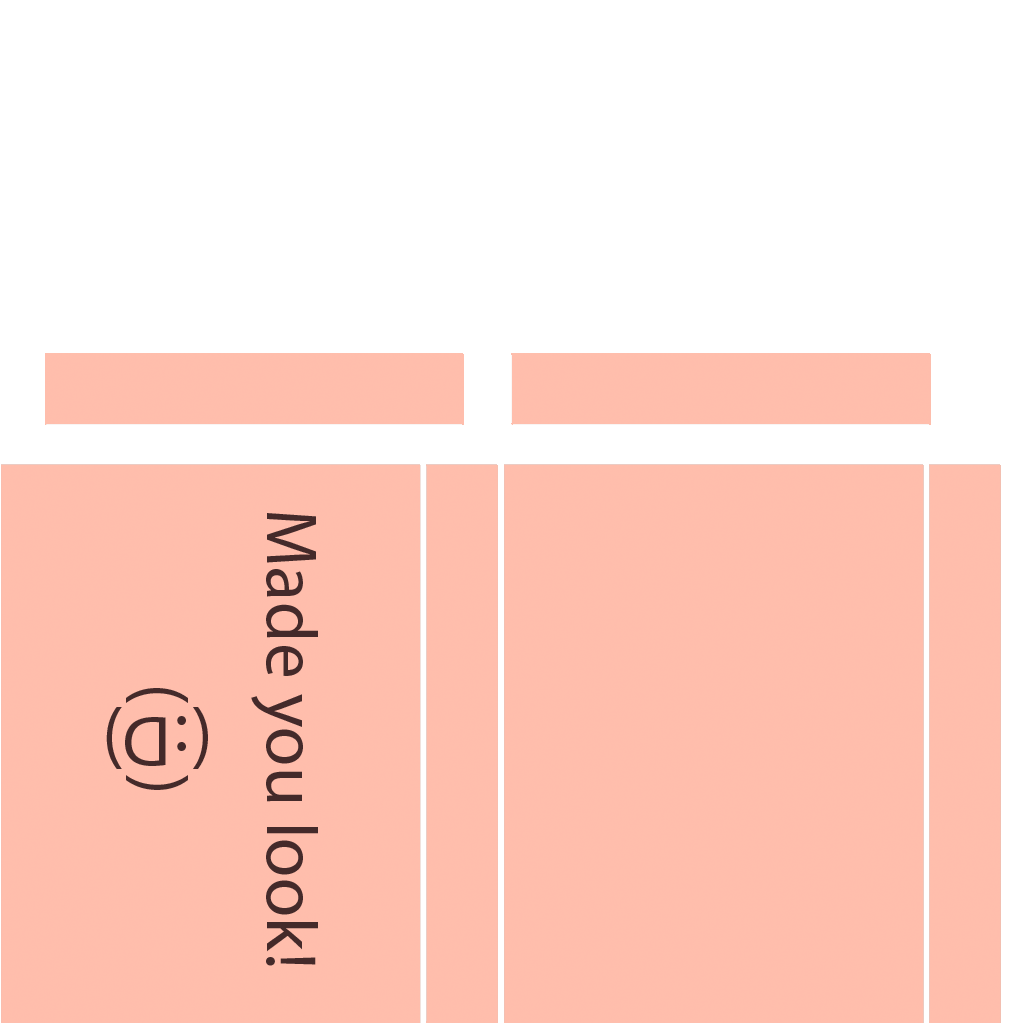
<style>
.page{position:relative;width:1024px;height:1024px;background:#ffffff}
.page>*{position:absolute;margin:0}
.t1{font:72px "MyriadHebrew-Regular";color:#442a2a}
.t2{font:72.3px "MyriadHebrew-Regular";letter-spacing:0.02em;color:#442a2a}
.t3{font:72.3px "MyriadHebrew-Regular";color:#442a2a}
</style>
<div class="page">
<p class="t1" style="left:251px;top:513px;width:67px;height:453px;rotate:90deg">!Made you look</p>
<p class="t2" style="left:126px;top:688px;width:62px;height:102px;rotate:90deg">(    )</p>
<p class="t3" style="left:106px;top:707px;width:102px;height:62px;rotate:180deg">(D:)</p>
</div>
